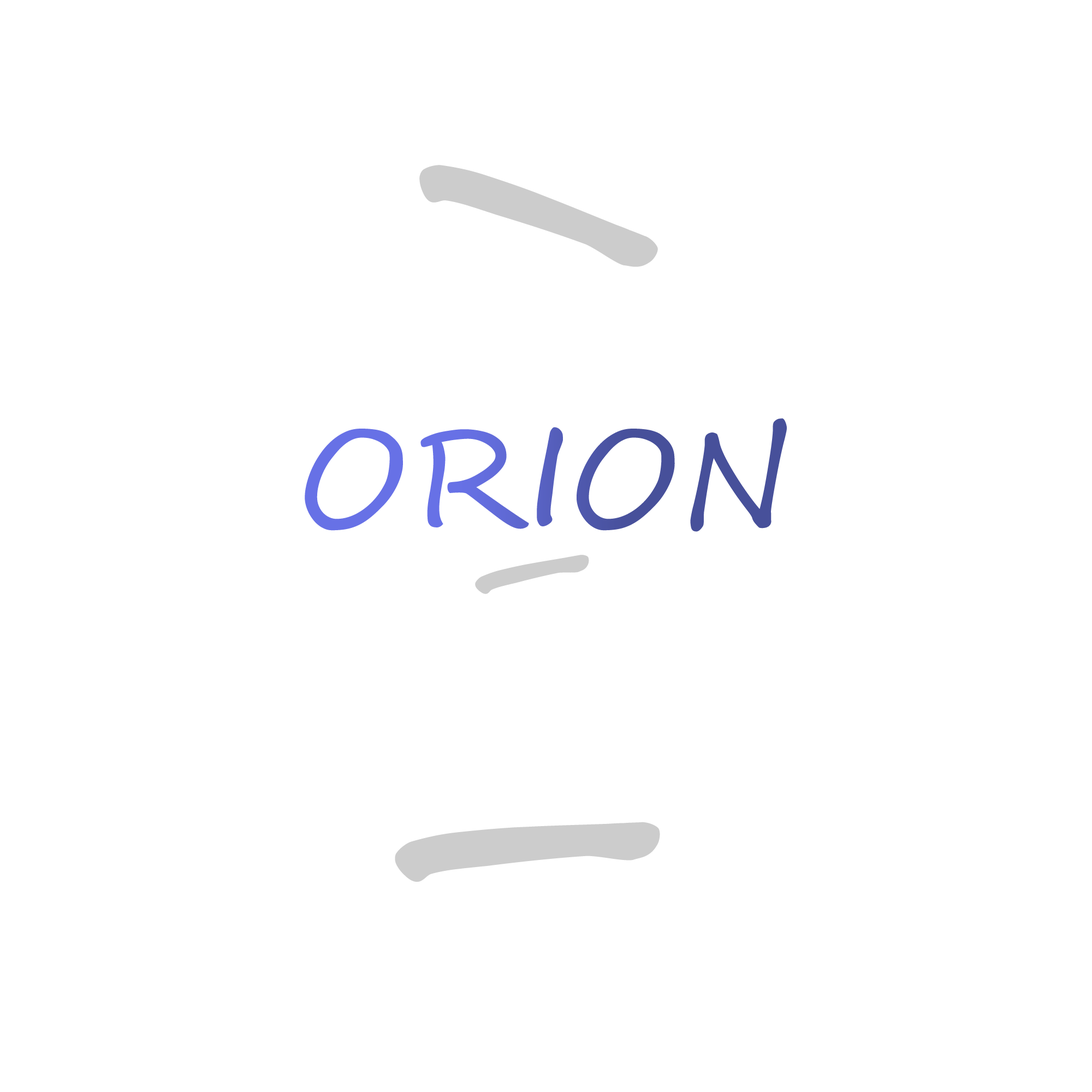
<style>
.page{position:relative;width:1092px;height:1092px;background:#ffffff}
.page>*{position:absolute;margin:0}
.t1{font:341.2px "SegoeScript";color:#cccccc}
.t2{font:136.5px "SegoeScript"}
.t3{font:159.2px "SegoeScript";color:#cccccc}
.t4{font:364px "SegoeScript";color:#cccccc}
</style>
<div class="page">
<p class="t1" style="left:419px;top:165px;width:239px;height:102px;rotate:101deg">I</p>
<p class="t2" style="left:305px;top:418px;width:482px;height:114px">ORION</p>
<p class="t3" style="left:475px;top:555px;width:114px;height:39px;rotate:69deg">I</p>
<p class="t4" style="left:395px;top:822px;width:265px;height:60px;rotate:77deg">I</p>
</div>
